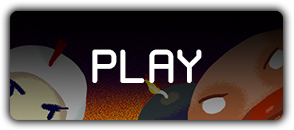
<style>
.page{position:relative;width:294px;height:130px}
.page>*{position:absolute;margin:0}
.t1{font:50px "WhiteRabbit";color:#ffffff}
</style>
<div class="page">
<p class="t1" style="left:92px;top:49px;width:110px;height:34px">PLAY</p>
</div>
